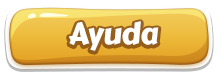
<style>
.page{position:relative;width:222px;height:78px;background:#ffffff}
.page>*{position:absolute;margin:0}
.t1{font:30px "CarterOne";letter-spacing:-0.02em;color:#ffffff}
</style>
<div class="page">
<p class="t1" style="left:69px;top:21px;width:90px;height:30px">Ayuda</p>
</div>
